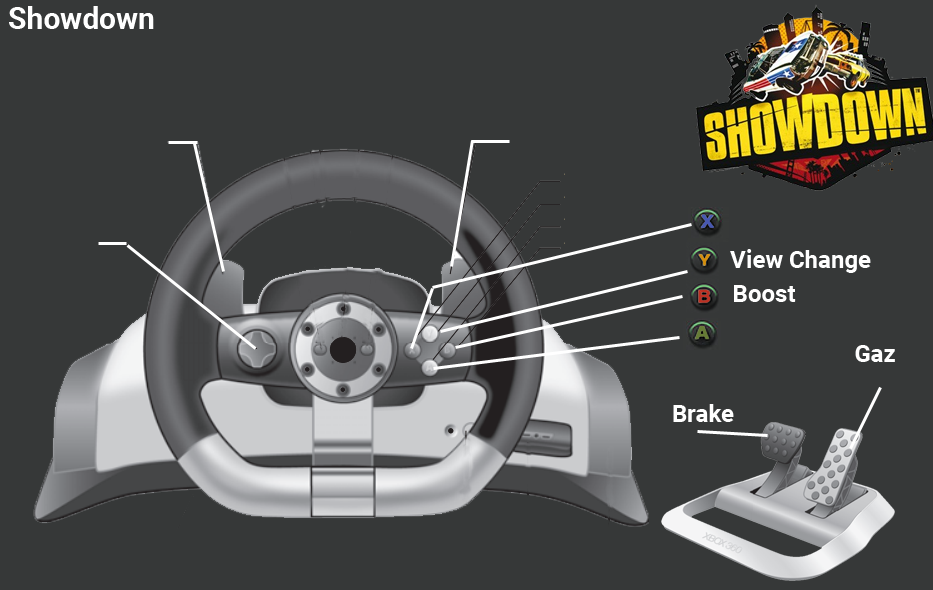
<style>
.page{position:relative;width:933px;height:590px;background:#363838}
.page>*{position:absolute;margin:0}
.t1{font:30px "Roboto-Bold";color:#ffffff}
.t2{font:24px "Roboto-Bold";color:#ffffff}
</style>
<div class="page">
<p class="t1" style="left:9px;top:6px;width:145px;height:23px">Showdown</p>
<p class="t2" style="left:730px;top:249px;width:141px;height:24px">View Change</p>
<p class="t2" style="left:734px;top:285px;width:62px;height:17px">Boost</p>
<p class="t2" style="left:855px;top:345px;width:40px;height:17px">Gaz</p>
<p class="t2" style="left:673px;top:404px;width:61px;height:18px">Brake</p>
</div>
